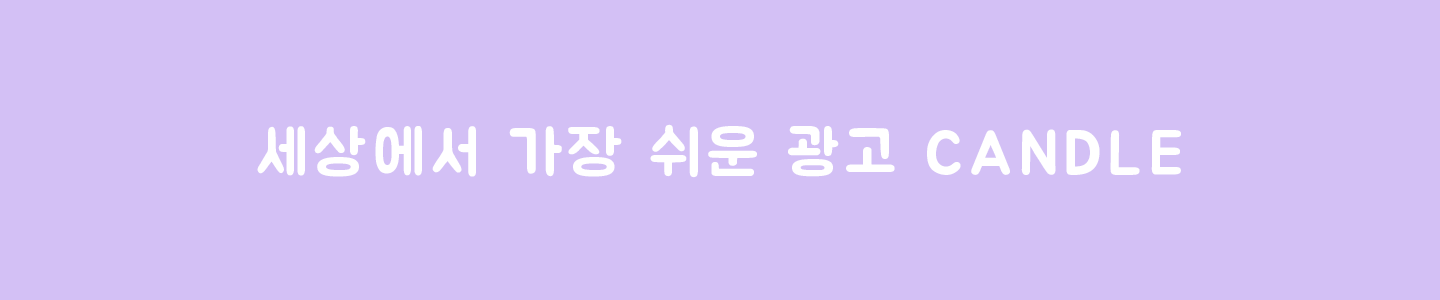
<style>
.page{position:relative;width:1440px;height:300px;background:#d3c0f5}
.page>*{position:absolute;margin:0}
.t1{font:62.5px "BMJUAOTF";letter-spacing:0.1em;color:#ffffff}
</style>
<div class="page">
<p class="t1" style="left:257px;top:124px;width:924px;height:54px">세상에서 가장 쉬운 광고 CANDLE</p>
</div>
